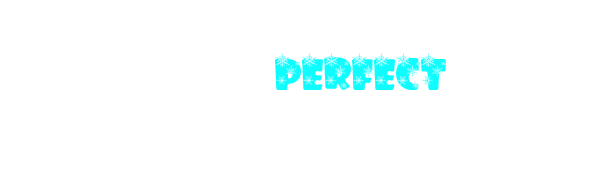
<style>
.page{position:relative;width:603px;height:192px;background:#ffffff}
.page>*{position:absolute;margin:0}
.t1{font:50px "winterflakes";color:#0ffcff}
</style>
<div class="page">
<p class="t1" style="left:275px;top:53px;width:172px;height:37px">PERFECT</p>
</div>
